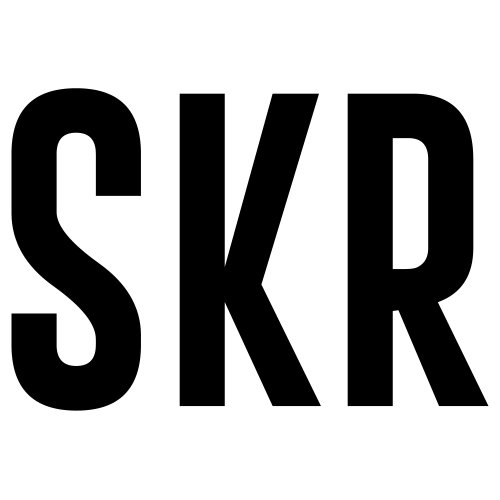
<style>
.page{position:relative;width:500px;height:500px;background:#ffffff}
.page>*{position:absolute;margin:0}
.t1{font:326.5px "GoboldExtra1";color:#000000}
</style>
<div class="page">
<p class="t1" style="left:11px;top:88px;width:478px;height:323px">SKR</p>
</div>
